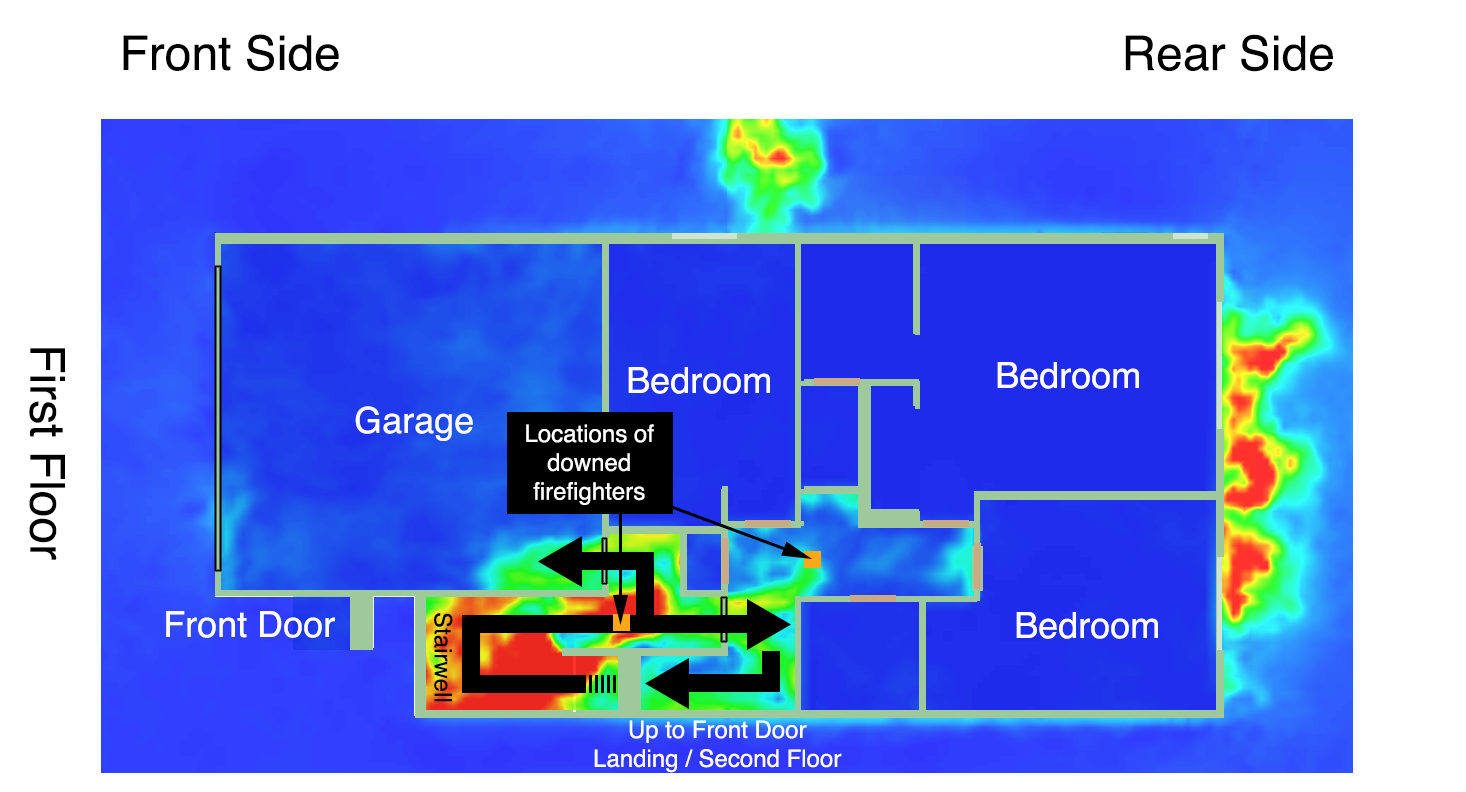
<style>
.page{position:relative;width:1466px;height:792px;background:#ffffff}
.page>*{position:absolute;margin:0}
.t1{font:48px "Helvetica";color:#000000}
.t2{font:36px "Helvetica";color:#ffffff}
.t3{font:24px "Helvetica";color:#ffffff}
.t4{font:24px "Helvetica";color:#000000}
</style>
<div class="page">
<p class="t1" style="left:123px;top:34px;width:216px;height:37px">Front Side</p>
<p class="t1" style="left:1125px;top:34px;width:208px;height:38px">Rear Side</p>
<p class="t1" style="left:29px;top:348px;width:36px;height:212px;rotate:90deg">First Floor</p>
<p class="t2" style="left:997px;top:362px;width:142px;height:27px">Bedroom</p>
<p class="t2" style="left:628px;top:367px;width:142px;height:27px">Bedroom</p>
<p class="t2" style="left:355px;top:406px;width:118px;height:35px">Garage</p>
<p class="t3" style="left:526px;top:424px;width:128px;height:81px;text-align:center">Locations of<br>downed<br>firefighters</p>
<p class="t2" style="left:166px;top:611px;width:169px;height:27px">Front Door</p>
<p class="t4" style="left:434px;top:613px;width:19px;height:89px;rotate:90deg">Stairwell</p>
<p class="t2" style="left:1016px;top:612px;width:142px;height:27px">Bedroom</p>
<p class="t3" style="left:594px;top:720px;width:248px;height:53px;text-align:center">Up to Front Door<br>Landing / Second Floor</p>
</div>
